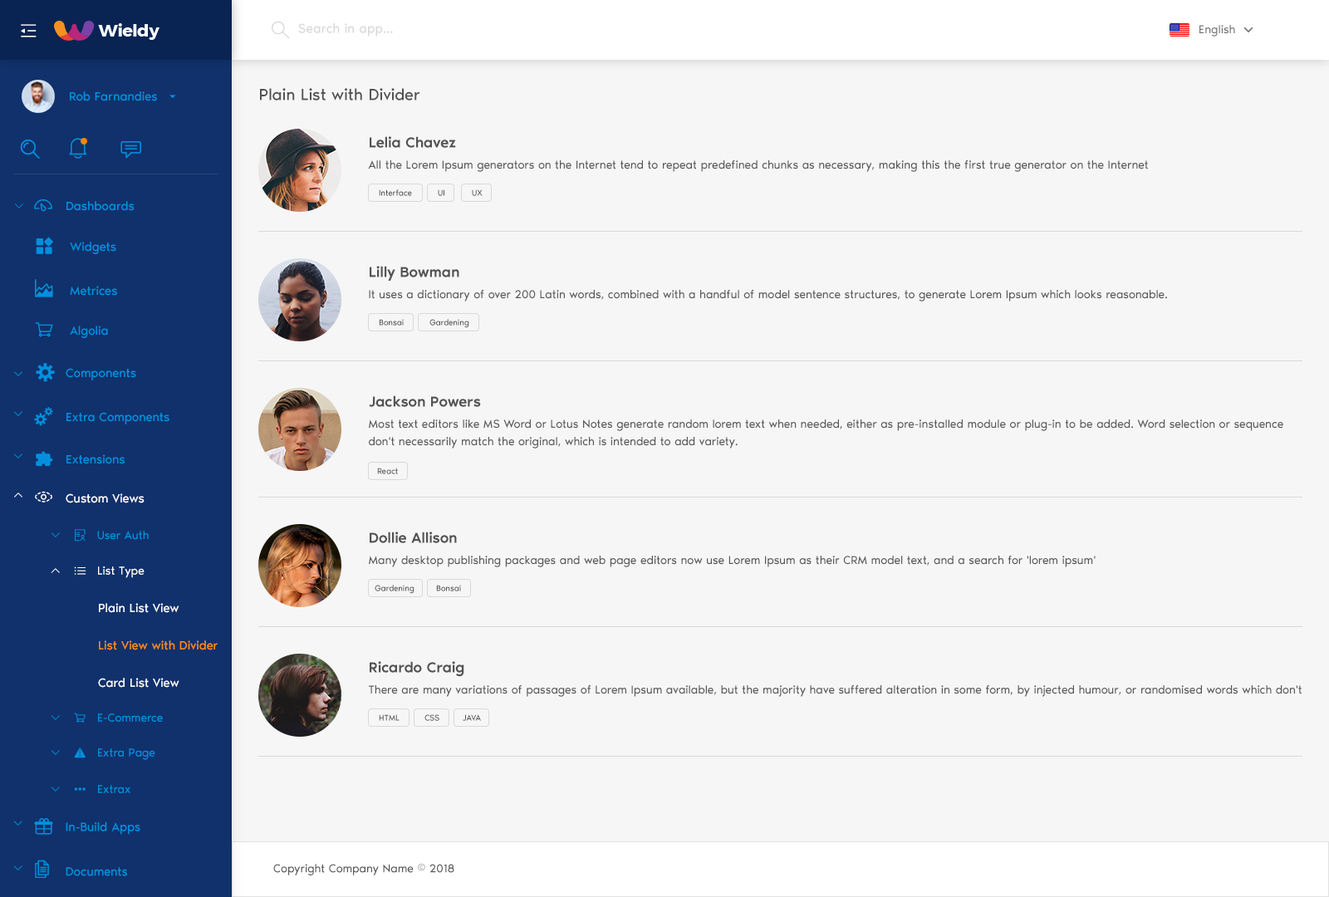
<style>
.page{position:relative;width:1329px;height:897px;background:#f6f6f6}
.page>*{position:absolute;margin:0}
.t1{font:13.3px "NoirPro-Regular";color:#d9d9d9}
.t2{font:11.6px "NoirPro-Regular";color:#757575}
.t3{font:16.6px "NoirPro-Regular";color:#535353}
.t4{font:12.5px "NoirPro-Regular";color:#038fde}
.t5{font:15px "NoirPro-Medium";color:#535353}
.t6{font:11.6px "NoirPro-Regular";color:#595959}
.t7{font:8.3px "NoirPro-Regular";color:#535353}
.t8{font:10px "gaxonant"}
.t9{font:18.3px "gaxonant";color:#038fde}
.t10{font:9.7px "gaxonant";color:#038fde}
.t11{font:11.6px/17.4px "NoirPro-Regular";color:#595959}
.t12{font:18.3px "gaxonant";color:#ffffff}
.t13{font:12.5px "NoirPro-Regular";color:#ffffff}
.t14{font:10px "gaxonant";color:#038fde}
.t15{font:11.6px "gaxonant";color:#038fde}
.t16{font:11.6px "NoirPro-Regular";color:#038fde}
.t17{font:10px "gaxonant";color:#ffffff}
.t18{font:11.6px "gaxonant";color:#ffffff}
.t19{font:11.6px "NoirPro-Regular";color:#ffffff}
.t20{font:12.5px/33.2px "NoirPro-Regular";color:#fa8c16}
.t21{font:12.5px/33.2px "NoirPro-Regular";color:#ffffff}
.t22{font:8.3px "NoirPro-Regular"}
.t23{font:12.4px "NoirPro-Regular";color:#038fde}
.t24{font:18.2px "gaxonant";color:#038fde}
</style>
<div class="page">
<p class="t1" style="left:298px;top:23px;width:95px;height:14px">Search in app...</p>
<p class="t2" style="left:1200px;top:25px;width:35px;height:12px">English</p>
<p class="t3" style="left:260px;top:88px;width:160px;height:13px">Plain List with Divider</p>
<p class="t4" style="left:70px;top:91px;width:87px;height:10px">Rob Farnandies</p>
<p class="t5" style="left:370px;top:136px;width:86px;height:12px">Lelia Chavez</p>
<p class="t6" style="left:368px;top:160px;width:780px;height:12px">All the Lorem Ipsum generators on the Internet tend to repeat predefined chunks as necessary, making this the first true generator on the Internet</p>
<p class="t7" style="left:379px;top:189px;width:33px;height:7px">Interface</p>
<p class="t7" style="left:438px;top:189px;width:6px;height:7px">UI</p>
<p class="t7" style="left:472px;top:189px;width:11px;height:7px">UX</p>
<p class="t8" style="left:15px;top:204px;width:8px;height:5px">2</p>
<p class="t9" style="left:34px;top:199px;width:18px;height:13px">-</p>
<p class="t4" style="left:66px;top:201px;width:69px;height:10px">Dashboards</p>
<p class="t4" style="left:70px;top:242px;width:46px;height:12px">Widgets</p>
<p class="t5" style="left:370px;top:266px;width:89px;height:15px">Lilly Bowman</p>
<p class="t9" style="left:35px;top:279px;width:18px;height:18px">m</p>
<p class="t4" style="left:70px;top:286px;width:47px;height:10px">Metrices</p>
<p class="t6" style="left:369px;top:290px;width:798px;height:12px">It uses a dictionary of over 200 Latin words, combined with a handful of model sentence structures, to generate Lorem Ipsum which looks reasonable.</p>
<p class="t4" style="left:70px;top:326px;width:38px;height:12px">Algolia</p>
<p class="t7" style="left:379px;top:319px;width:25px;height:7px">Bonsai</p>
<p class="t7" style="left:429px;top:319px;width:40px;height:9px">Gardening</p>
<p class="t9" style="left:36px;top:363px;width:19px;height:19px">%</p>
<p class="t10" style="left:14px;top:371px;width:8px;height:5px">2</p>
<p class="t4" style="left:66px;top:368px;width:70px;height:12px">Components</p>
<p class="t5" style="left:369px;top:395px;width:112px;height:12px">Jackson Powers</p>
<p class="t10" style="left:14px;top:411px;width:8px;height:5px">2</p>
<p class="t4" style="left:66px;top:412px;width:103px;height:12px">Extra Components</p>
<p class="t11" style="left:369px;top:420px;width:914px;height:29px">Most text editors like MS Word or Lotus Notes generate random lorem text when needed, either as pre-installed module or plug-in to be added. Word selection or sequence don't necessarily match the original, which is intended to add variety.</p>
<p class="t10" style="left:14px;top:454px;width:8px;height:5px">2</p>
<p class="t4" style="left:66px;top:454px;width:59px;height:10px">Extensions</p>
<p class="t7" style="left:377px;top:468px;width:21px;height:6px">React</p>
<p class="t8" style="left:14px;top:493px;width:8px;height:5px">5</p>
<p class="t12" style="left:35px;top:491px;width:17px;height:12px">,</p>
<p class="t13" style="left:66px;top:493px;width:79px;height:10px">Custom Views</p>
<p class="t14" style="left:52px;top:532px;width:8px;height:5px">2</p>
<p class="t15" style="left:75px;top:529px;width:11px;height:13px">r</p>
<p class="t16" style="left:97px;top:531px;width:52px;height:9px">User Auth</p>
<p class="t5" style="left:370px;top:532px;width:87px;height:11px">Dollie Allison</p>
<p class="t6" style="left:369px;top:556px;width:727px;height:11px">Many desktop publishing packages and web page editors now use Lorem Ipsum as their CRM model text, and a search for 'lorem ipsum'</p>
<p class="t17" style="left:51px;top:568px;width:9px;height:5px">5</p>
<p class="t18" style="left:74px;top:567px;width:12px;height:8px">h</p>
<p class="t19" style="left:98px;top:567px;width:47px;height:11px">List Type</p>
<p class="t7" style="left:375px;top:585px;width:40px;height:9px">Gardening</p>
<p class="t7" style="left:436px;top:585px;width:25px;height:6px">Bonsai</p>
<p class="t20" style="left:98px;top:603px;width:120px;height:85px"><span class="t21">Plain List View<br></span>List View with Divider<br><span class="t21">Card List View</span></p>
<p class="t5" style="left:370px;top:661px;width:94px;height:16px">Ricardo Craig</p>
<p class="t6" style="left:369px;top:685px;width:933px;height:12px">There are many variations of passages of Lorem Ipsum available, but the majority have suffered alteration in some form, by injected humour, or randomised words which don't look even slightly believable.</p>
<p class="t16" style="left:98px;top:714px;width:65px;height:8px">E-Commerce</p>
<p class="t14" style="left:52px;top:715px;width:8px;height:5px">2</p>
<p class="t22" style="left:379px;top:714px;width:21px;height:7px">HTML</p>
<p class="t22" style="left:424px;top:714px;width:15px;height:7px">CSS</p>
<p class="t7" style="left:463px;top:714px;width:18px;height:7px">JAVA</p>
<p class="t15" style="left:74px;top:748px;width:12px;height:10px">~</p>
<p class="t16" style="left:98px;top:748px;width:57px;height:12px">Extra Page</p>
<p class="t14" style="left:52px;top:750px;width:8px;height:5px">2</p>
<p class="t16" style="left:98px;top:785px;width:32px;height:8px">Extrax</p>
<p class="t14" style="left:52px;top:787px;width:8px;height:5px">2</p>
<p class="t15" style="left:74px;top:788px;width:12px;height:3px">{</p>
<p class="t10" style="left:13px;top:821px;width:9px;height:5px">2</p>
<p class="t23" style="left:66px;top:822px;width:74px;height:13px">In-Build Apps</p>
<p class="t10" style="left:13px;top:866px;width:9px;height:5px">2</p>
<p class="t24" style="left:35px;top:860px;width:14px;height:18px">)</p>
<p class="t23" style="left:66px;top:867px;width:61px;height:9px">Documents</p>
<p class="t6" style="left:273px;top:864px;width:181px;height:12px">Copyright Company Name © 2018</p>
</div>
